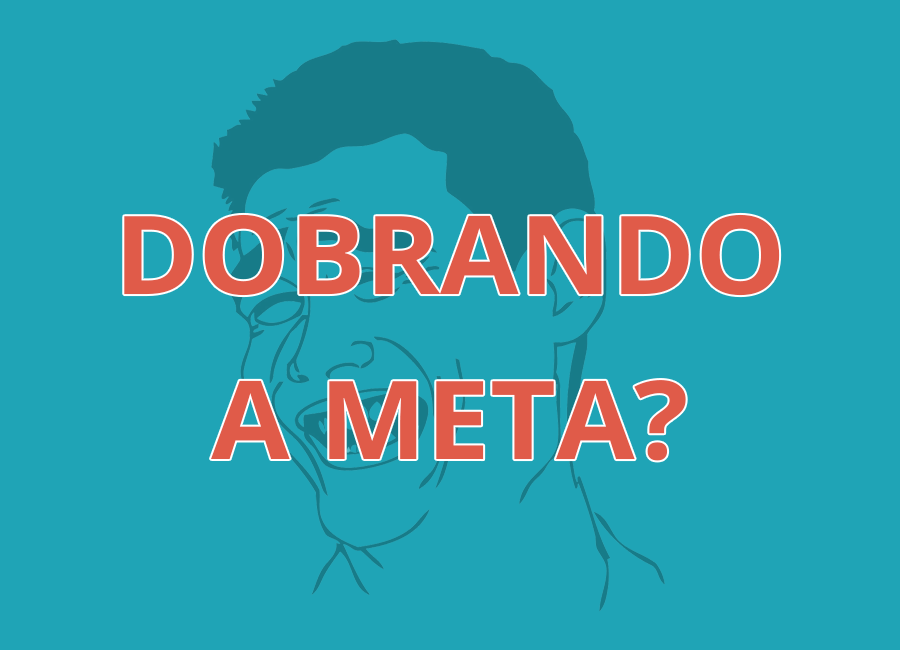
<style>
.page{position:relative;width:900px;height:650px;background:#1fa4b6}
.page>*{position:absolute;margin:0}
.t1{font:109px/15px "OpenSans-Bold";color:#e05b49;scale:1.04 1}
</style>
<div class="page">
<p class="t1" style="left:124px;top:214px;width:656px;height:247px;text-align:center">DOBRANDO<br><br><br><br><br><br><br><br><br><br><br>A META?</p>
</div>
